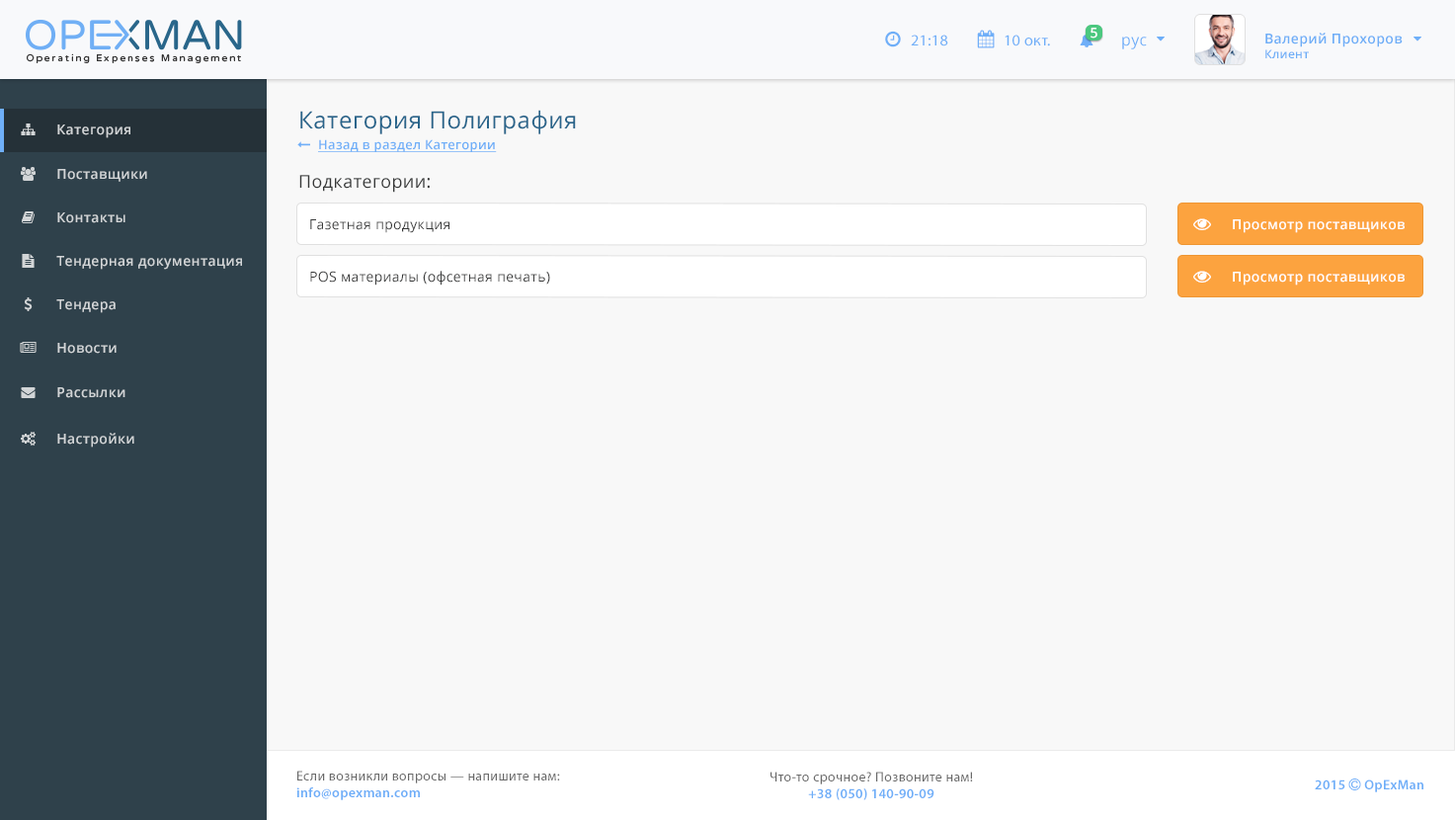
<style>
.page{position:relative;width:1455px;height:820px;background:#f8f8f8}
.page>*{position:absolute;margin:0}
.t1{font:13.8px "OpenSans-Semibold";letter-spacing:0.025em;color:#ffffff}
.t2{font:15.7px "MyriadPro-Regular";letter-spacing:0.025em;color:#6faff8}
.t3{font:15.7px "OpenSans";letter-spacing:0.025em;color:#6eaff8}
.t4{font:13.8px "OpenSans-Semibold";letter-spacing:0.025em;color:#6eaef7}
.t5{font:11.8px "OpenSans-Semibold";letter-spacing:0.025em;color:#6eaef7}
.t6{font:23.6px "OpenSans";letter-spacing:0.025em;color:#29658b}
.t7{font:13.8px "OpenSans-Semibold";letter-spacing:0.025em;color:#d2d5d7}
.t8{font:12.8px "OpenSans-Semibold";letter-spacing:0.025em;color:#6faff8;text-decoration:underline}
.t9{font:17.7px "OpenSans";letter-spacing:0.025em;color:#373838}
.t10{font:13.8px "OpenSans";letter-spacing:0.025em;color:#373838}
.t11{font:13.8px "MyriadPro-Regular";letter-spacing:0.025em;color:#696969}
.t12{font:13.8px "MyriadPro-Semibold";letter-spacing:0.025em;color:#6eaef8}
</style>
<div class="page">
<p class="t1" style="left:1090px;top:28px;width:7px;height:11px">5</p>
<p class="t2" style="left:911px;top:35px;width:37px;height:11px">21:18</p>
<p class="t2" style="left:1004px;top:35px;width:46px;height:11px">10 окт.</p>
<p class="t3" style="left:1122px;top:37px;width:25px;height:12px">рус</p>
<p class="t4" style="left:1265px;top:33px;width:137px;height:25px">Валерий Прохоров<br><span class="t5">Клиент</span></p>
<p class="t6" style="left:300px;top:110px;width:276px;height:24px">Категория Полиграфия</p>
<p class="t7" style="left:57px;top:124px;width:73px;height:14px">Категория</p>
<p class="t8" style="left:318px;top:139px;width:179px;height:13px">Назад в раздел Категории</p>
<p class="t7" style="left:57px;top:169px;width:90px;height:13px">Поставщики</p>
<p class="t9" style="left:299px;top:175px;width:131px;height:18px">Подкатегории:</p>
<p class="t7" style="left:57px;top:212px;width:68px;height:11px">Контакты</p>
<p class="t10" style="left:310px;top:219px;width:139px;height:14px">Газетная продукция</p>
<p class="t1" style="left:1233px;top:219px;width:171px;height:14px">Просмотр поставщиков</p>
<p class="t7" style="left:56px;top:256px;width:186px;height:14px">Тендерная документация</p>
<p class="t10" style="left:310px;top:271px;width:240px;height:14px">POS материалы (офсетная печать)</p>
<p class="t1" style="left:1233px;top:272px;width:171px;height:13px">Просмотр поставщиков</p>
<p class="t7" style="left:56px;top:299px;width:60px;height:14px">Тендера</p>
<p class="t7" style="left:57px;top:343px;width:60px;height:11px">Новости</p>
<p class="t7" style="left:57px;top:387px;width:68px;height:11px">Рассылки</p>
<p class="t7" style="left:57px;top:433px;width:77px;height:14px">Настройки</p>
<p class="t11" style="left:296px;top:770px;width:264px;height:30px">Если возникли вопросы — напишите нам:<br><span class="t12">info@opexman.com</span></p>
<p class="t11" style="left:770px;top:771px;width:203px;height:29px;text-align:center">Что-то срочное? Позвоните нам!<br><span class="t12">+38 (050) 140-90-09</span></p>
</div>
